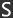
<style>
.page{position:relative;width:13px;height:18px;background:#333333}
.page>*{position:absolute;margin:0}
.t1{font:20px "MicrosoftNewTaiLue";color:#ffffff}
</style>
<div class="page">
<p class="t1" style="left:2px;top:2px;width:9px;height:15px">S</p>
</div>
